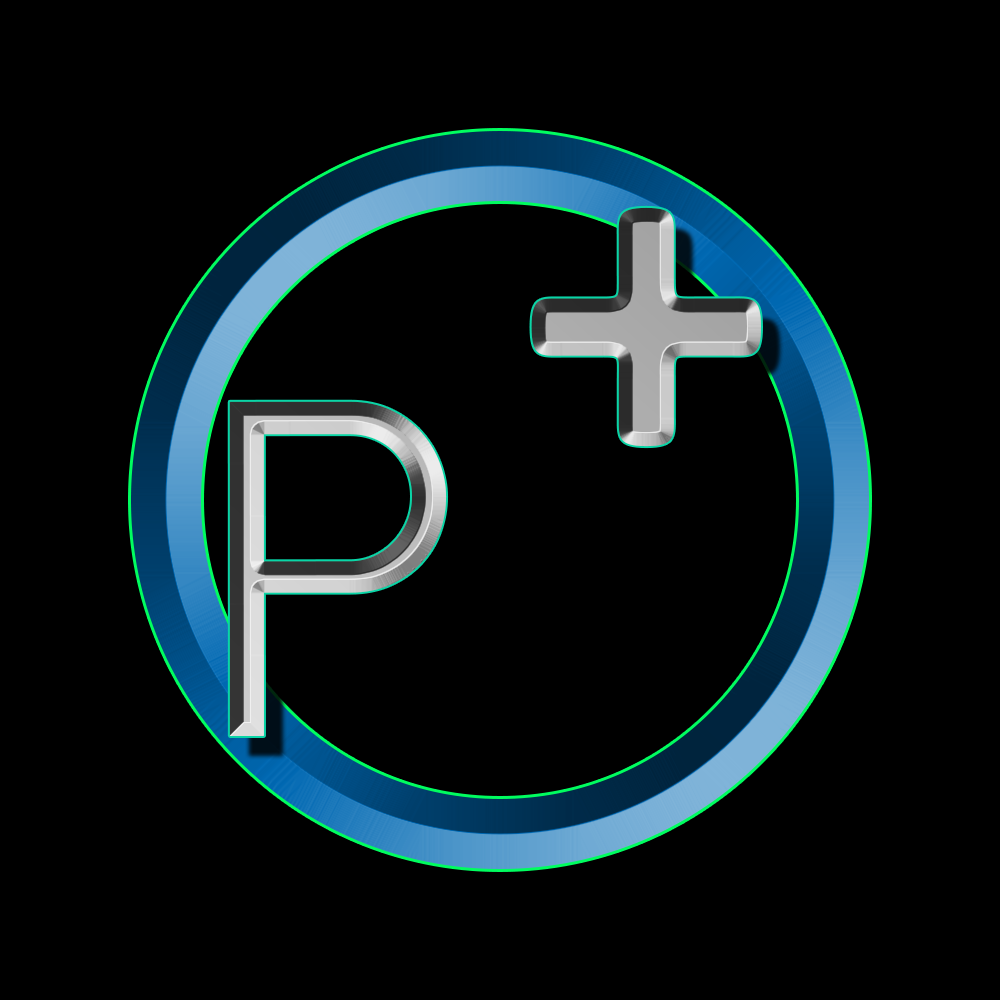
<style>
.page{position:relative;width:1000px;height:1000px;background:#000000}
.page>*{position:absolute;margin:0}
.t1{font:477px "DevanagariSangamMN";letter-spacing:0.07em;scale:0.95 1}
.t2{font:492px "CooperBlackStd";letter-spacing:0.15em;scale:0.96 1}
</style>
<div class="page">
<p class="t1" style="left:229px;top:207px;width:532px;height:529px">P<span class="t2">+</span></p>
</div>
